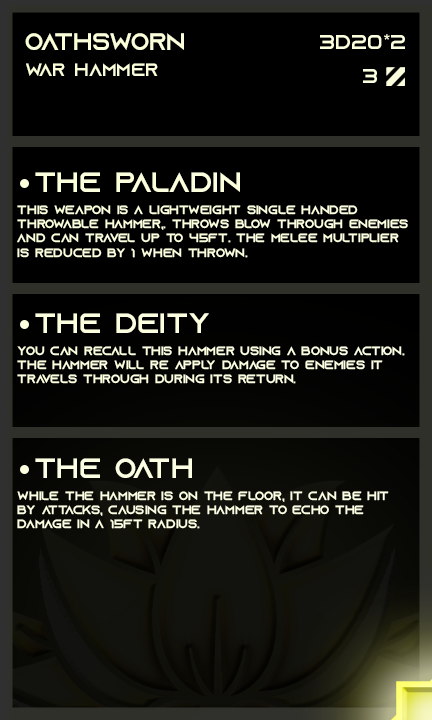
<style>
.page{position:relative;width:432px;height:720px;background:#000000}
.page>*{position:absolute;margin:0}
.t1{font:24px "AzonixRegular";color:#faffda}
.t2{font:20px "AzonixRegular";color:#fbffdc}
.t3{font:18px "AzonixRegular";color:#faffda}
.t4{font:20px "AzonixRegular";color:#fbffdd}
.t5{font:28px "AzonixRegular";color:#fbffdc}
.t6{font:12px "AzonixRegular";color:#fbffde}
.t7{font:28px "AzonixRegular";color:#fbffdf}
.t8{font:12px "AzonixRegular";color:#fcffe0}
.t9{font:28px "AzonixRegular";color:#fcffe1}
.t10{font:12px "AzonixRegular";color:#fcffe3}
</style>
<div class="page">
<p class="t1" style="left:25px;top:33px;width:159px;height:17px">oathsworn</p>
<p class="t2" style="left:320px;top:34px;width:85px;height:15px">3d20*2</p>
<p class="t3" style="left:26px;top:63px;width:132px;height:13px">war hammer</p>
<p class="t4" style="left:363px;top:69px;width:14px;height:14px">3</p>
<p class="t5" style="left:35px;top:172px;width:205px;height:20px">the paladin</p>
<p class="t6" style="left:17px;top:205px;width:391px;height:53px">this weapon is a lightweight single handed<br>throwable hammer,. throws blow through enemies<br>and can travel up to 45ft. the melee multiplier<br>is reduced by 1 when thrown.</p>
<p class="t7" style="left:35px;top:313px;width:174px;height:20px">the deity</p>
<p class="t8" style="left:17px;top:346px;width:388px;height:38px">you can recall this hammer using a bonus action.<br>the hammer will re apply damage to enemies it <br>travels through during its return.</p>
<p class="t9" style="left:35px;top:458px;width:157px;height:20px">the oath</p>
<p class="t10" style="left:17px;top:491px;width:372px;height:38px">while the hammer is on the floor, it can be hit<br>by attacks, causing the hammer to echo the <br>damage in a 15ft radius.</p>
</div>
